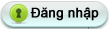
<style>
.page{position:relative;width:109px;height:29px}
.page>*{position:absolute;margin:0}
.t1{font:13.3px "ArialMT";color:#000000;font-weight:bold}
</style>
<div class="page">
<p class="t1" style="left:30px;top:7px;width:69px;height:14px">Đăng nhập</p>
</div>
